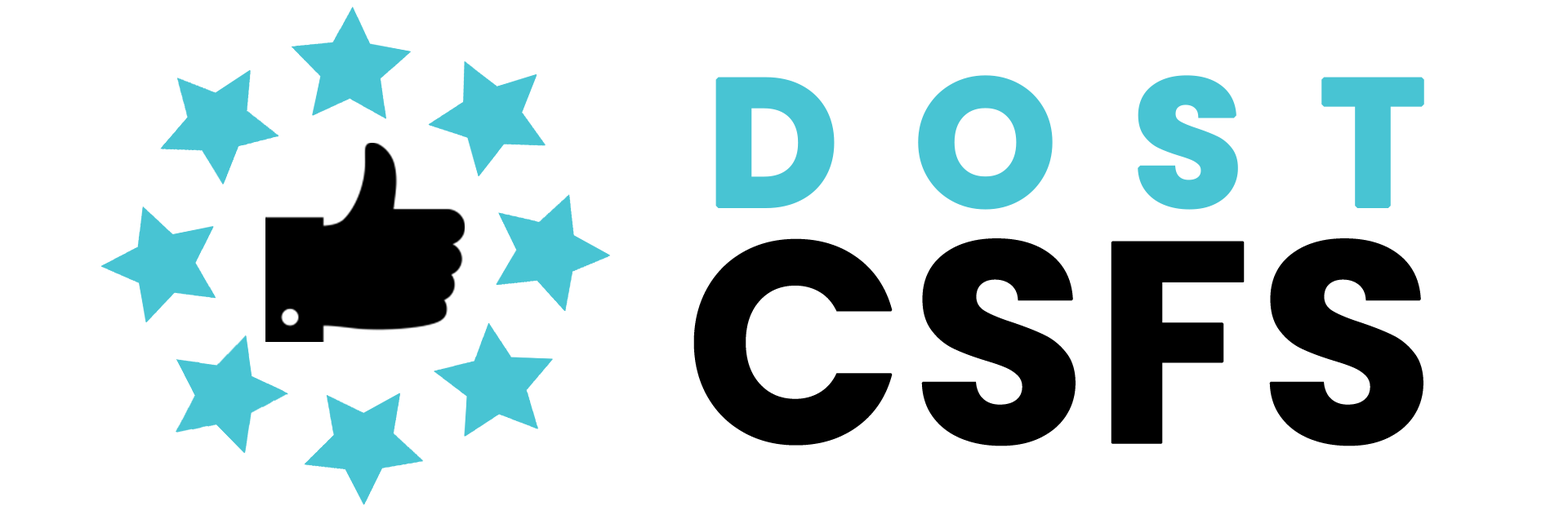
<style>
.page{position:relative;width:1568px;height:506px;background:#ffffff}
.page>*{position:absolute;margin:0}
.t1{font:179.7px "Poppins-Bold";letter-spacing:0.4em;color:#48c4d3;font-weight:bold}
.t2{font:285.8px "Poppins-Bold";color:#000000;font-weight:bold}
</style>
<div class="page">
<p class="t1" style="left:715px;top:75px;width:709px;height:135px">DOST</p>
<p class="t2" style="left:693px;top:238px;width:730px;height:209px">CSFS</p>
</div>
